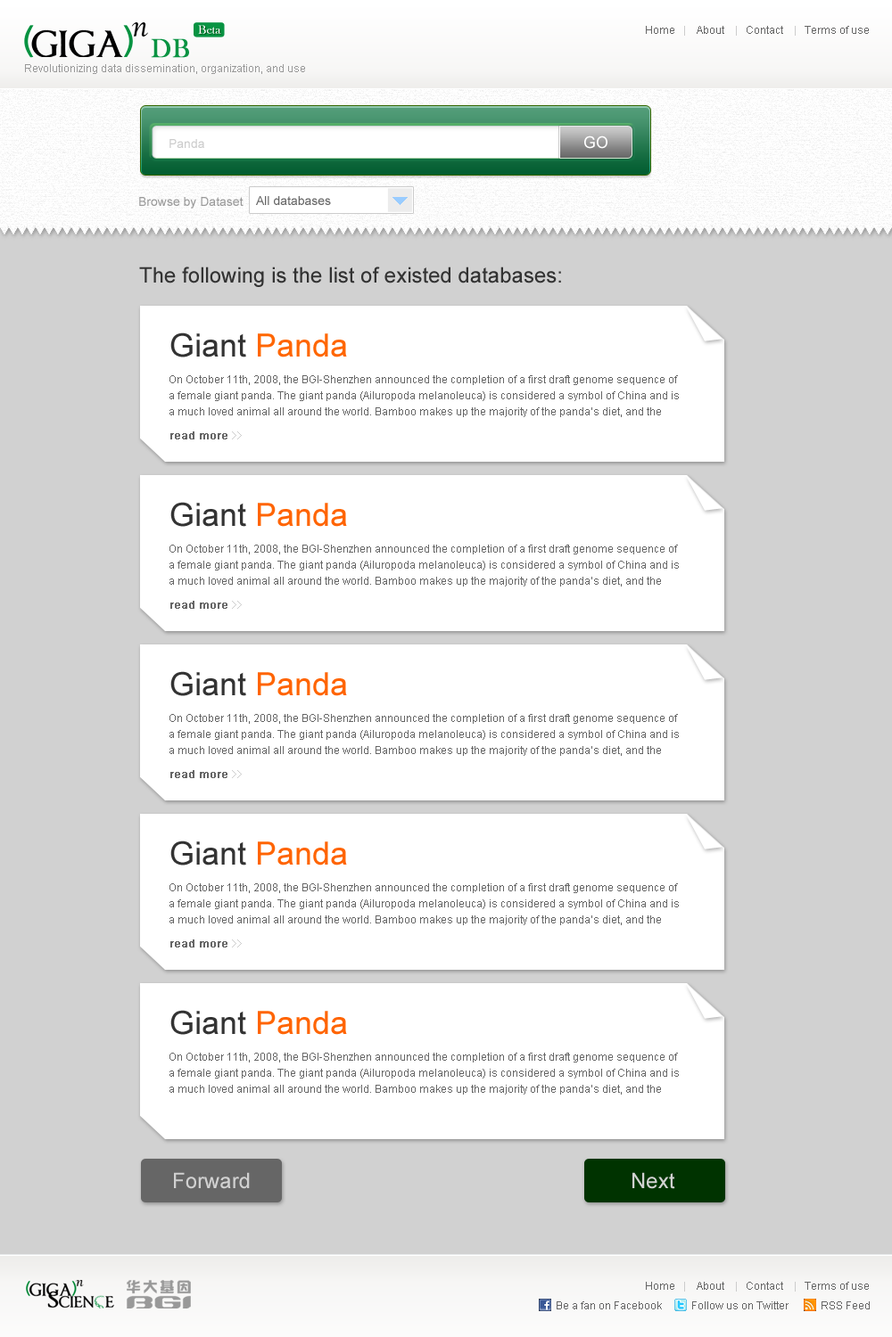
<style>
.page{position:relative;width:892px;height:1337px;background:#d1d1d1}
.page>*{position:absolute;margin:0}
.t1{font:12.5px "BaskOldFace";color:#ffffff}
.t2{font:10.7px "ArialMT";color:#666666}
.t3{font:10.7px "ArialMT";color:#cccccc}
.t4{font:26.7px "BaskOldFace";color:#089342;font-weight:bold}
.t5{font:10.7px "ArialMT";color:#999999}
.t6{font:16px "ArialMT";color:#ffffff}
.t7{font:12.5px "ArialMT";color:#cccccc}
.t8{font:12.5px "ArialMT";color:#999999}
.t9{font:12.5px "ArialMT";color:#666666}
.t10{font:21.4px "ArialMT";color:#333333}
.t11{font:32.1px "ArialMT";color:#333333}
.t12{font:32.1px "ArialMT";color:#ff6600}
.t13{font:10.7px/16px "ArialMT";color:#666666}
.t14{font:10.7px "ArialMT";color:#666666;font-weight:bold}
.t15{font:10.7px "SimSun";color:#cccccc}
.t16{font:32.1px "ArialMT";color:#ff6401}
.t17{font:21.4px "ArialMT";color:#d1d1d1}
</style>
<div class="page">
<p class="t1" style="left:198px;top:25px;width:23px;height:9px">Beta</p>
<p class="t2" style="left:646px;top:26px;width:222px;height:10px">Home<span class="t3">   |    </span>About <span class="t3">   |   </span>Contact<span class="t3">    |   </span>Terms of use</p>
<p class="t4" style="left:151px;top:38px;width:38px;height:20px">DB</p>
<p class="t5" style="left:25px;top:64px;width:280px;height:10px">Revolutionizing data dissemination, organization, and use</p>
<p class="t6" style="left:584px;top:136px;width:23px;height:13px">GO</p>
<p class="t7" style="left:169px;top:139px;width:35px;height:9px">Panda</p>
<p class="t8" style="left:139px;top:197px;width:104px;height:12px">Browse by Dataset</p>
<p class="t9" style="left:256px;top:196px;width:75px;height:9px">All databases</p>
<p class="t10" style="left:139px;top:267px;width:422px;height:20px">The following is the list of existed databases:</p>
<p class="t11" style="left:170px;top:333px;width:177px;height:25px">Giant <span class="t12">Panda</span></p>
<p class="t13" style="left:169px;top:375px;width:510px;height:42px">On October 11th, 2008, the BGI-Shenzhen announced the completion of a first draft genome sequence of a female giant panda. The giant panda (Ailuropoda melanoleuca) is considered a symbol of China and is a much loved animal all around the world. Bamboo makes up the majority of the panda’s diet, and the</p>
<p class="t14" style="left:170px;top:432px;width:72px;height:8px">read more <span class="t15">&gt;&gt;</span></p>
<p class="t11" style="left:170px;top:502px;width:177px;height:25px">Giant <span class="t16">Panda</span></p>
<p class="t13" style="left:169px;top:545px;width:510px;height:42px">On October 11th, 2008, the BGI-Shenzhen announced the completion of a first draft genome sequence of a female giant panda. The giant panda (Ailuropoda melanoleuca) is considered a symbol of China and is a much loved animal all around the world. Bamboo makes up the majority of the panda’s diet, and the</p>
<p class="t14" style="left:170px;top:601px;width:72px;height:8px">read more <span class="t15">&gt;&gt;</span></p>
<p class="t11" style="left:170px;top:671px;width:177px;height:25px">Giant <span class="t16">Panda</span></p>
<p class="t13" style="left:169px;top:714px;width:510px;height:42px">On October 11th, 2008, the BGI-Shenzhen announced the completion of a first draft genome sequence of a female giant panda. The giant panda (Ailuropoda melanoleuca) is considered a symbol of China and is a much loved animal all around the world. Bamboo makes up the majority of the panda’s diet, and the</p>
<p class="t14" style="left:170px;top:770px;width:72px;height:8px">read more <span class="t15">&gt;&gt;</span></p>
<p class="t11" style="left:170px;top:841px;width:177px;height:25px">Giant <span class="t16">Panda</span></p>
<p class="t13" style="left:169px;top:884px;width:510px;height:41px">On October 11th, 2008, the BGI-Shenzhen announced the completion of a first draft genome sequence of a female giant panda. The giant panda (Ailuropoda melanoleuca) is considered a symbol of China and is a much loved animal all around the world. Bamboo makes up the majority of the panda’s diet, and the</p>
<p class="t14" style="left:170px;top:940px;width:72px;height:8px">read more <span class="t15">&gt;&gt;</span></p>
<p class="t11" style="left:170px;top:1010px;width:177px;height:25px">Giant <span class="t16">Panda</span></p>
<p class="t13" style="left:169px;top:1053px;width:510px;height:42px">On October 11th, 2008, the BGI-Shenzhen announced the completion of a first draft genome sequence of a female giant panda. The giant panda (Ailuropoda melanoleuca) is considered a symbol of China and is a much loved animal all around the world. Bamboo makes up the majority of the panda’s diet, and the</p>
<p class="t17" style="left:174px;top:1172px;width:76px;height:17px">Forward</p>
<p class="t17" style="left:632px;top:1172px;width:43px;height:17px">Next</p>
<p class="t2" style="left:646px;top:1282px;width:222px;height:10px">Home<span class="t3">   |    </span>About <span class="t3">   |   </span>Contact<span class="t3">    |   </span>Terms of use</p>
<p class="t2" style="left:556px;top:1302px;width:313px;height:8px">Be a fan on Facebook           Follow us on Twitter            RSS Feed</p>
</div>
